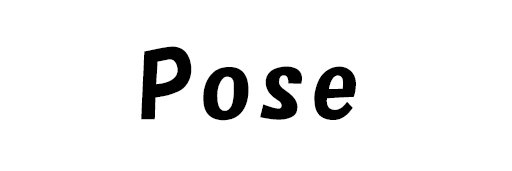
<style>
.page{position:relative;width:512px;height:171px;background:#ffffff}
.page>*{position:absolute;margin:0}
.t1{font:90px "HGPSoeiKakupoptai";letter-spacing:0.08em;color:#000000}
</style>
<div class="page">
<p class="t1" style="left:141px;top:46px;width:215px;height:75px">Pose</p>
</div>
